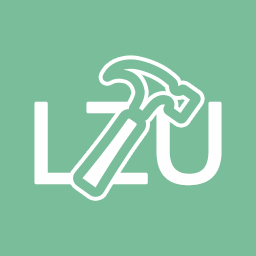
<style>
.page{position:relative;width:256px;height:256px;background:#79bd9a}
.page>*{position:absolute;margin:0}
.t1{font:106.3px "MicrosoftYaHei";letter-spacing:-0.05em;color:#fefefe;font-weight:bold;scale:1.04 1}
</style>
<div class="page">
<p class="t1" style="left:34px;top:101px;width:188px;height:85px">LZU</p>
</div>
